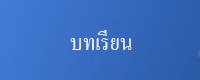
<style>
.page{position:relative;width:200px;height:80px}
.page>*{position:absolute;margin:0}
.t1{font:30.1px "AngsanaNew";color:#f0f0f7;scale:0.94 1}
</style>
<div class="page">
<p class="t1" style="left:70px;top:30px;width:62px;height:20px">บทเรียน</p>
</div>
